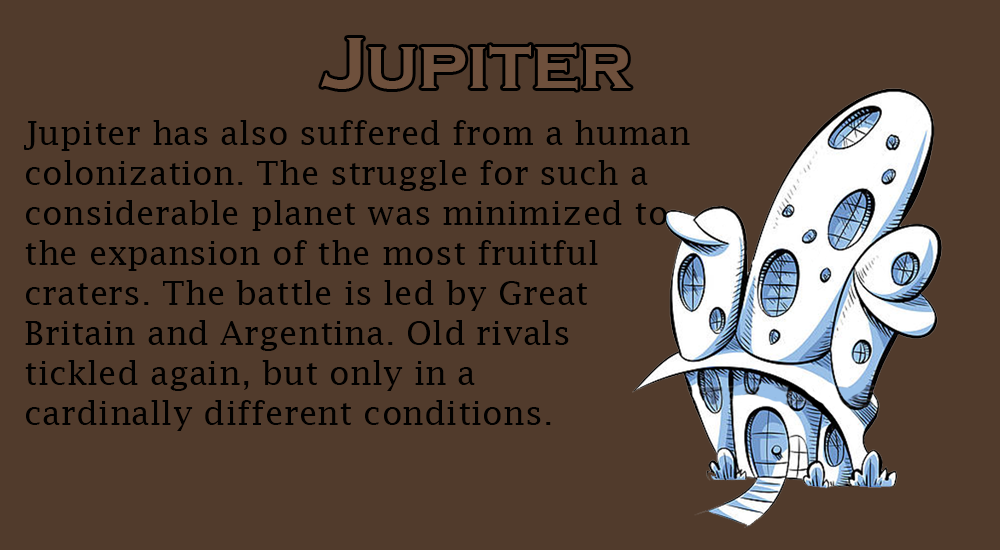
<style>
.page{position:relative;width:1000px;height:550px;background:#513b2c}
.page>*{position:absolute;margin:0}
.t1{font:75px "CopperplateGothic-Bold";color:#6e503c}
.t2{font:33.3px "LucidaFax";color:#000000}
</style>
<div class="page">
<p class="t1" style="left:321px;top:38px;width:310px;height:52px">Jupiter</p>
<p class="t2" style="left:24px;top:120px;width:666px;height:311px">Jupiter has also suffered from a human<br>colonization. The struggle for such a<br>considerable planet was minimized to<br>the expansion of the most fruitful<br>craters. The battle is led by Great<br>Britain and Argentina. Old rivals<br>tickled again, but only in a<br>cardinally different conditions.</p>
</div>
